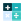
<style>
.page{position:relative;width:24px;height:24px;background:#ffffff}
.page>*{position:absolute;margin:0}
.t1{font:9.1px "Consolas-Bold";color:#000000}
.t2{font:9.1px "Consolas-Bold";color:#ffffff}
</style>
<div class="page">
<p class="t1" style="left:5px;top:5px;width:6px;height:5px"><span class="t2">+</span> - <br>× ÷</p>
<p class="t2" style="left:5px;top:13px;width:5px;height:5px">×</p>
<p class="t2" style="left:13px;top:13px;width:6px;height:6px">÷</p>
<p class="t1" style="left:14px;top:7px;width:4px;height:2px"><span class="t2">-<br></span>× ÷</p>
</div>
